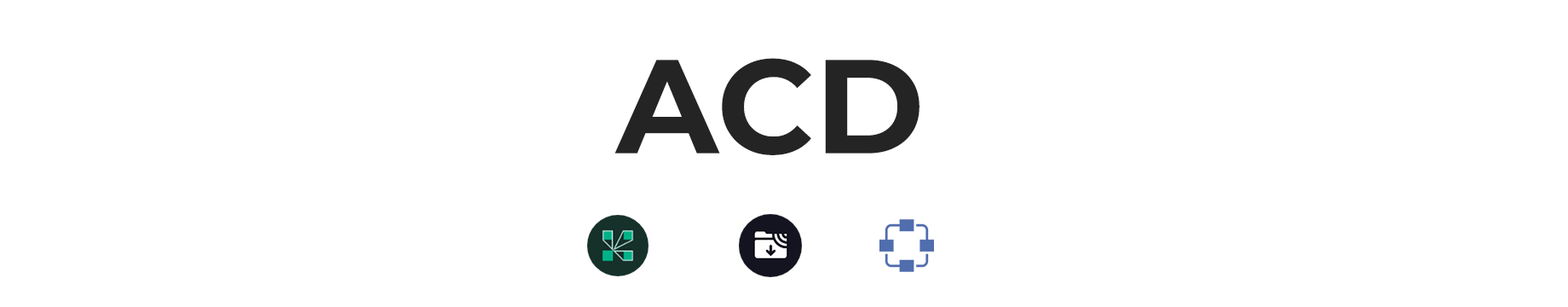
<style>
.page{position:relative;width:1568px;height:307px;background:#ffffff}
.page>*{position:absolute;margin:0}
.t1{font:133.2px "Montserrat-Bold";color:#242424}
</style>
<div class="page">
<p class="t1" style="left:614px;top:58px;width:305px;height:97px">ACD</p>
</div>
